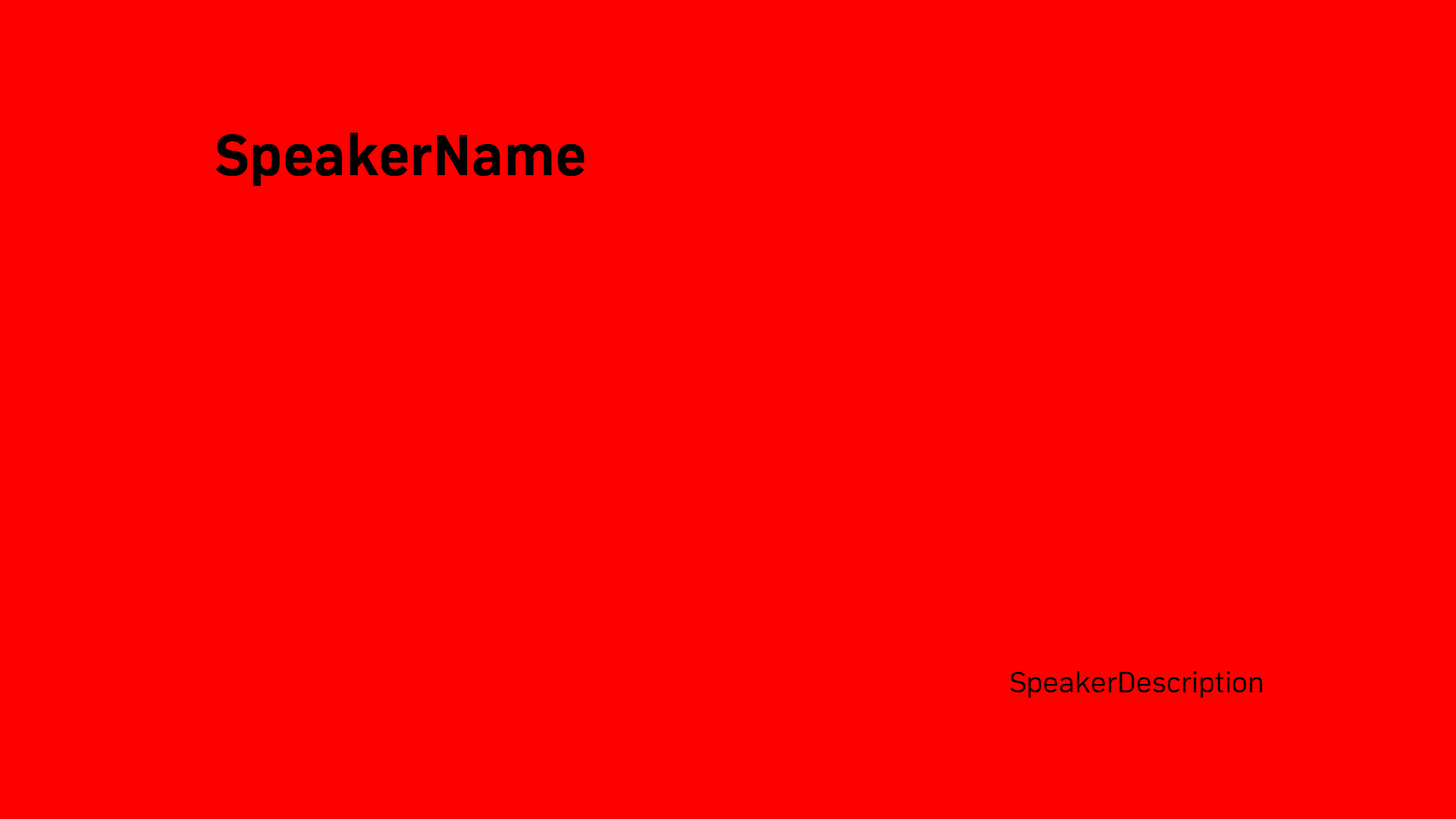
<style>
.page{position:relative;width:1456px;height:819px;background:#ff0000}
.page>*{position:absolute;margin:0}
.t1{font:60.7px "Compasse-Bold";color:#000000}
.t2{font:30.3px "Compasse-Light";color:#000000}
</style>
<div class="page">
<p class="t1" style="left:216px;top:133px;width:369px;height:53px">SpeakerName</p>
<p class="t2" style="left:1010px;top:671px;width:253px;height:27px">SpeakerDescription</p>
</div>
